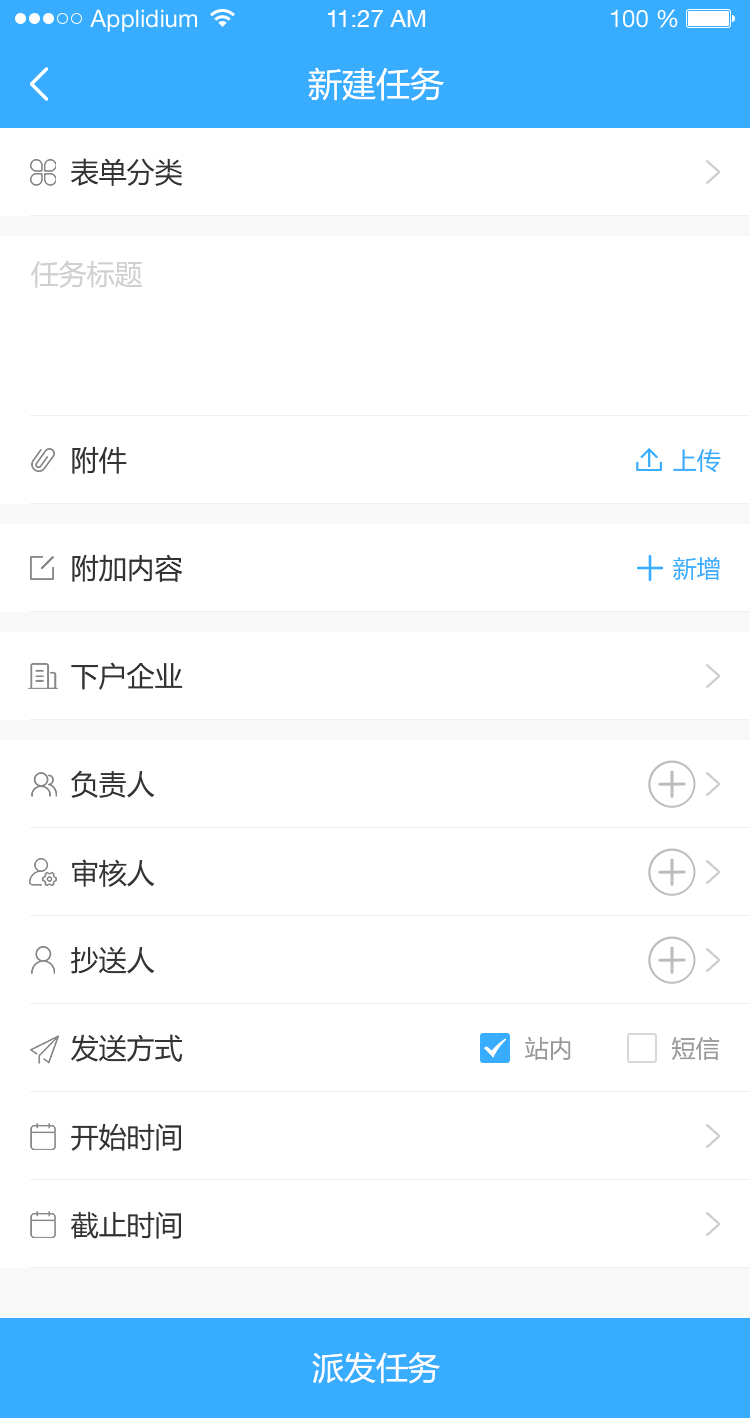
<style>
.page{position:relative;width:750px;height:1418px;background:#ffffff}
.page>*{position:absolute;margin:0}
.t1{font:24px "HelveticaNeueLTStd-Roman";color:#ffffff}
.t2{font:24px "HelveticaNeueCE-Roman";color:#ffffff}
.t3{font:34px "MicrosoftYaHei";color:#ffffff}
.t4{font:28px "MicrosoftYaHei";color:#333333}
.t5{font:28px "MicrosoftYaHei";color:#d0d0d0}
.t6{font:24px "MicrosoftYaHei";color:#38adff}
.t7{font:24px "MicrosoftYaHei";color:#999999}
.t8{font:32px "MicrosoftYaHei";color:#ffffff}
</style>
<div class="page">
<p class="t1" style="left:90px;top:9px;width:107px;height:23px">Applidium</p>
<p class="t2" style="left:328px;top:10px;width:98px;height:17px">11:27 AM</p>
<p class="t1" style="left:611px;top:9px;width:67px;height:19px">100 %</p>
<p class="t3" style="left:308px;top:67px;width:136px;height:34px">新建任务</p>
<p class="t4" style="left:71px;top:158px;width:112px;height:28px">表单分类</p>
<p class="t5" style="left:31px;top:260px;width:111px;height:28px">任务标题</p>
<p class="t4" style="left:72px;top:446px;width:55px;height:28px">附件</p>
<p class="t6" style="left:673px;top:449px;width:48px;height:23px">上传</p>
<p class="t4" style="left:72px;top:554px;width:111px;height:28px">附加内容</p>
<p class="t6" style="left:673px;top:557px;width:47px;height:24px">新增</p>
<p class="t4" style="left:71px;top:662px;width:112px;height:28px">下户企业</p>
<p class="t4" style="left:71px;top:770px;width:84px;height:28px">负责人</p>
<p class="t4" style="left:72px;top:859px;width:83px;height:28px">审核人</p>
<p class="t4" style="left:71px;top:946px;width:84px;height:28px">抄送人</p>
<p class="t4" style="left:71px;top:1034px;width:112px;height:28px">发送方式</p>
<p class="t7" style="left:525px;top:1037px;width:46px;height:23px">站内</p>
<p class="t7" style="left:671px;top:1037px;width:49px;height:24px">短信</p>
<p class="t4" style="left:71px;top:1123px;width:110px;height:28px">开始时间</p>
<p class="t4" style="left:71px;top:1211px;width:110px;height:28px">截止时间</p>
<p class="t8" style="left:312px;top:1352px;width:128px;height:32px">派发任务</p>
</div>
